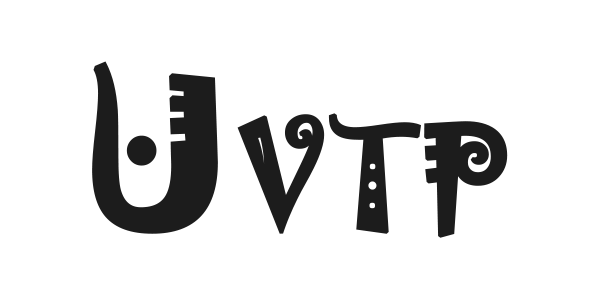
<style>
.page{position:relative;width:600px;height:300px;background:#ffffff}
.page>*{position:absolute;margin:0}
.t1{font:130px "Jokerman-Regular";color:#1c1c1c;font-weight:bold}
.t2{font:200px "Jokerman-Regular";color:#1c1c1c;font-weight:bold}
</style>
<div class="page">
<p class="t1" style="left:92px;top:61px;width:416px;height:177px"><span class="t2">U</span>VTP</p>
</div>
